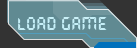
<style>
.page{position:relative;width:137px;height:48px;background:#608a92}
.page>*{position:absolute;margin:0}
.t1{font:18.4px "QuartzMS";color:#c5eff7;scale:0.89 1}
</style>
<div class="page">
<p class="t1" style="left:18px;top:17px;width:89px;height:13px">LOAD GAME</p>
</div>
